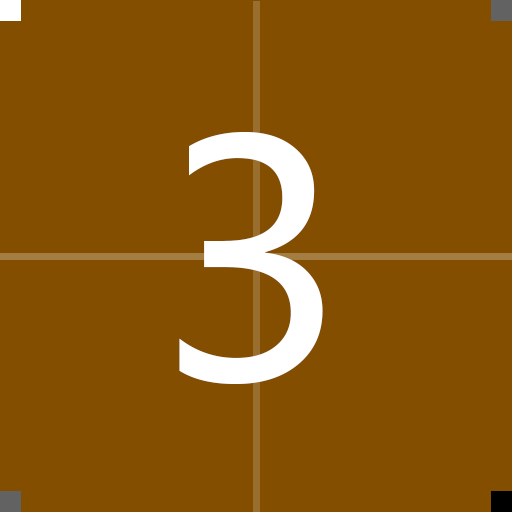
<style>
.page{position:relative;width:512px;height:512px;background:#834e00}
.page>*{position:absolute;margin:0}
.t1{font:323.1px "MicrosoftYaHei";color:#ffffff}
</style>
<div class="page">
<p class="t1" style="left:179px;top:132px;width:144px;height:252px">3</p>
</div>
